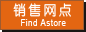
<style>
.page{position:relative;width:86px;height:32px;background:#e36612}
.page>*{position:absolute;margin:0}
.t1{font:14px "FZY3JW--GB1-0";letter-spacing:0.2em;color:#ffffff;scale:0.9 1}
.t2{font:9px "ArialMT";letter-spacing:0.05em;color:#ffffff;scale:0.9 1}
</style>
<div class="page">
<p class="t1" style="left:13px;top:3px;width:59px;height:14px">销售网点</p>
<p class="t2" style="left:21px;top:19px;width:45px;height:7px">Find Astore</p>
</div>
